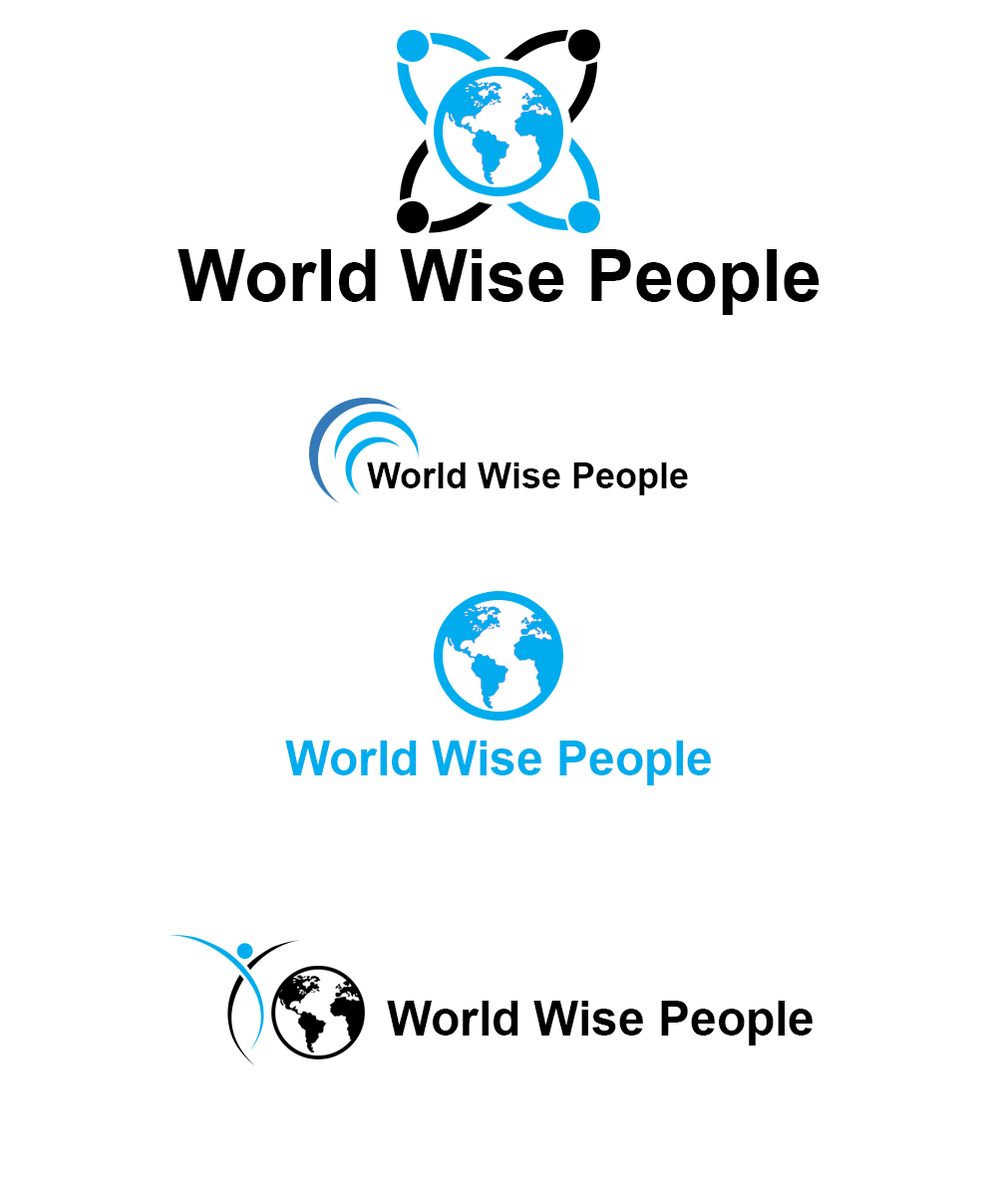
<style>
.page{position:relative;width:997px;height:1196px;background:#ffffff}
.page>*{position:absolute;margin:0}
.t1{font:71.8px "Arial-BoldMT";color:#000000}
.t2{font:35.9px "Arial-BoldMT";color:#000000}
.t3{font:47.8px "Arial-BoldMT";color:#00aced}
.t4{font:47.8px "Arial-BoldMT";color:#000000}
</style>
<div class="page">
<p class="t1" style="left:177px;top:249px;width:642px;height:66px">World Wise People</p>
<p class="t2" style="left:367px;top:463px;width:321px;height:32px">World Wise People</p>
<p class="t3" style="left:285px;top:741px;width:426px;height:45px">World Wise People</p>
<p class="t4" style="left:387px;top:1001px;width:425px;height:45px">World Wise People</p>
</div>
